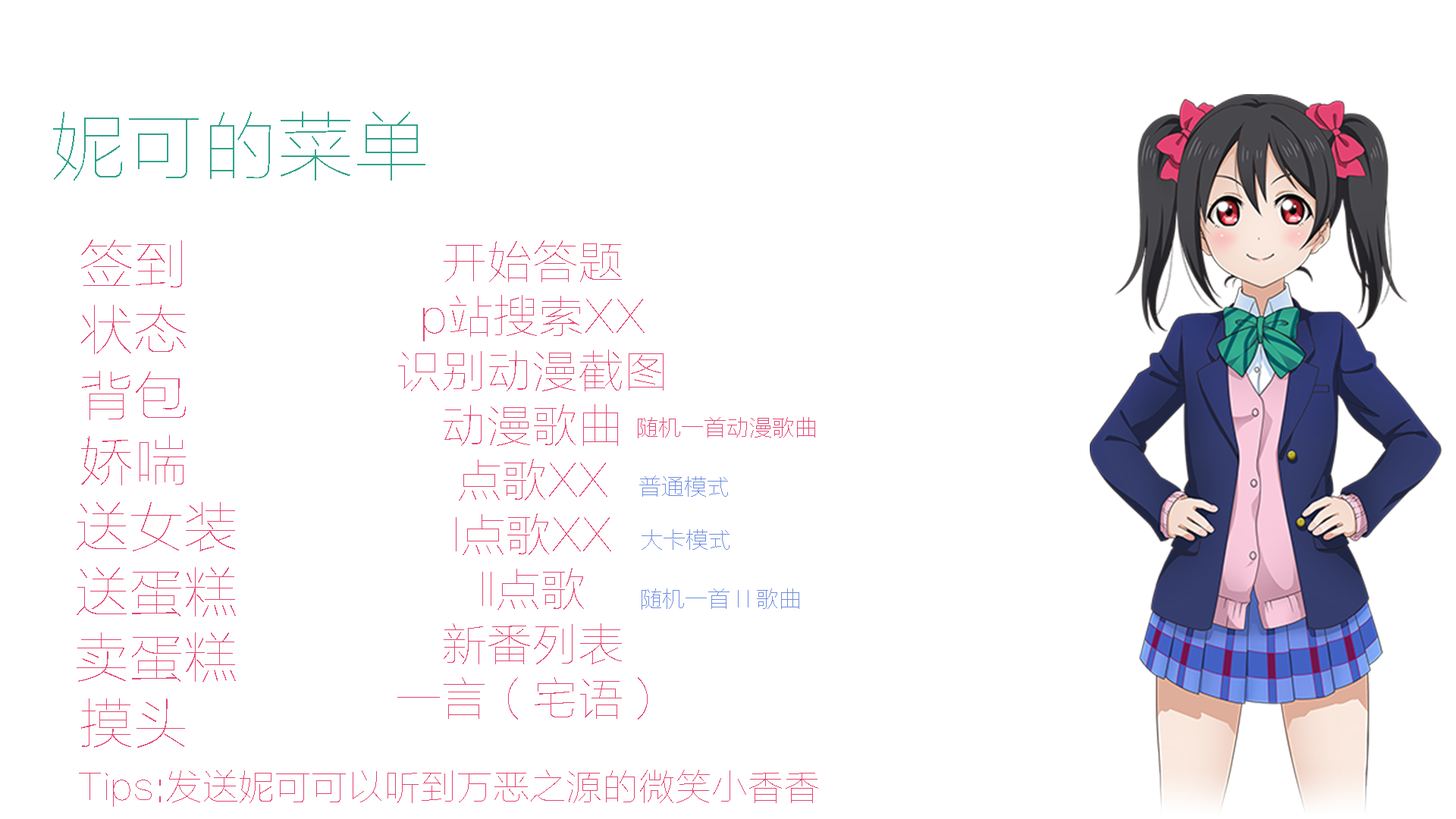
<style>
.page{position:relative;width:1456px;height:819px;background:#ffffff}
.page>*{position:absolute;margin:0}
.t1{font:75.8px "FZLTCXHJW--GB1-0";color:#31a28a}
.t2{font:54.6px "FZLTCXHJW--GB1-0";color:#e44471}
.t3{font:45.5px "FZLTCXHJW--GB1-0";color:#e44471}
.t4{font:22.7px "FZLTCXHJW--GB1-0";color:#e44471}
.t5{font:22.7px "FZLTCXHJW--GB1-0";color:#6d8ce0}
.t6{font:36.4px "FZLTCXHJW--GB1-0";color:#e44471}
</style>
<div class="page">
<p class="t1" style="left:53px;top:111px;width:372px;height:69px">妮可的菜单</p>
<p class="t2" style="left:77px;top:240px;width:159px;height:508px;text-align:center">签到<br>状态<br>背包<br>娇喘<br>   送女装<br>   送蛋糕<br>   卖蛋糕<br>摸头</p>
<p class="t3" style="left:397px;top:240px;width:267px;height:480px;text-align:center">开始答题<br>p站搜索XX<br>识别动漫截图<br>动漫歌曲<br>点歌XX<br>l点歌XX<br>ll点歌<br>新番列表<br>一言（宅语）</p>
<p class="t4" style="left:638px;top:417px;width:177px;height:21px">随机一首动漫歌曲</p>
<p class="t5" style="left:639px;top:475px;width:89px;height:22px">普通模式</p>
<p class="t5" style="left:642px;top:529px;width:88px;height:21px">大卡模式</p>
<p class="t5" style="left:642px;top:588px;width:157px;height:22px">随机一首 l l 歌曲</p>
<p class="t6" style="left:79px;top:770px;width:739px;height:37px">Tips:发送妮可可以听到万恶之源的微笑小香香</p>
</div>
